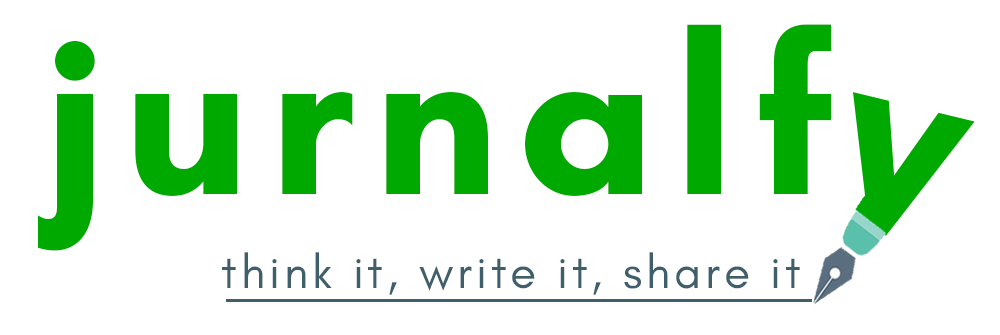
<style>
.page{position:relative;width:1000px;height:335px;background:#ffffff}
.page>*{position:absolute;margin:0}
.t1{font:225.7px "GlacialIndifference-Bold";letter-spacing:0.08em;color:#00a900}
.t2{font:47.8px "GlacialIndifference-Regular";letter-spacing:0.08em;color:#405f6c}
</style>
<div class="page">
<p class="t1" style="left:38px;top:24px;width:793px;height:227px">jurnalf</p>
<p class="t2" style="left:222px;top:252px;width:578px;height:43px">think it, write it, share it</p>
</div>
